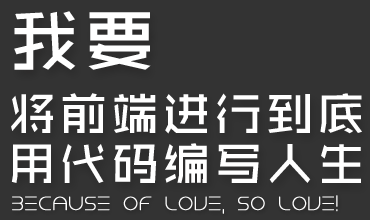
<style>
.page{position:relative;width:370px;height:220px;background:#333333}
.page>*{position:absolute;margin:0}
.t1{font:48px/50px "ZHSCNMT--GBK1-0";letter-spacing:0.075em;color:#ffffff}
.t2{font:72px/85px "ZHSCNMT--GBK1-0";letter-spacing:0.05em;color:#ffffff}
.t3{font:18px "NEONCLUBMUSIC";letter-spacing:-0.01em;color:#ffffff;font-weight:bold}
</style>
<div class="page">
<p class="t1" style="left:11px;top:11px;width:351px;height:172px"><span class="t2">我要<br></span>将前端进行到底<br>用代码编写人生</p>
<p class="t3" style="left:12px;top:195px;width:326px;height:19px">Because of love, so love!</p>
</div>
